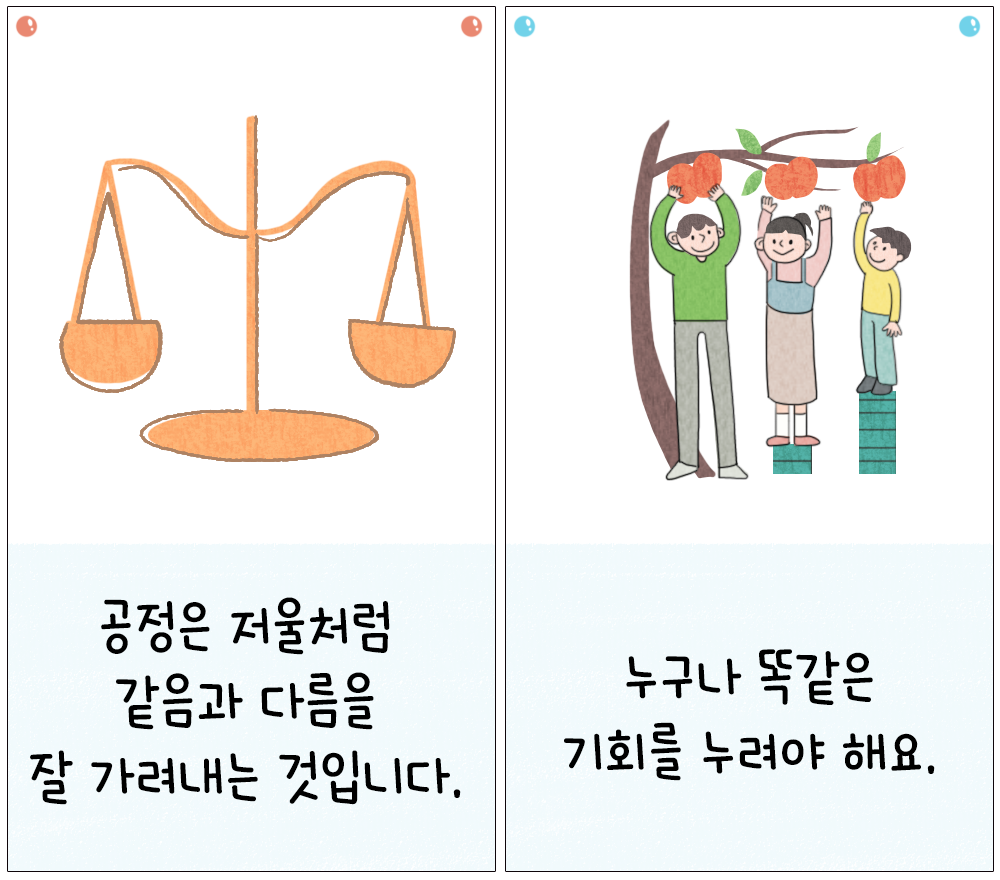
<style>
.page{position:relative;width:1000px;height:880px;background:#ffffff}
.page>*{position:absolute;margin:0}
.t1{font:62.5px "HakgyoansimNadeuriOTF-L";color:#000000}
.t2{font:62.6px "HakgyoansimNadeuriOTF-L";color:#000000}
</style>
<div class="page">
<p class="t1" style="left:30px;top:597px;width:431px;height:208px;text-align:center">공정은 저울처럼<br>같음과 다름을<br>잘 가려내는 것입니다.</p>
<p class="t2" style="left:564px;top:649px;width:371px;height:132px;text-align:center">누구나 똑같은<br>기회를 누려야 해요.</p>
</div>
